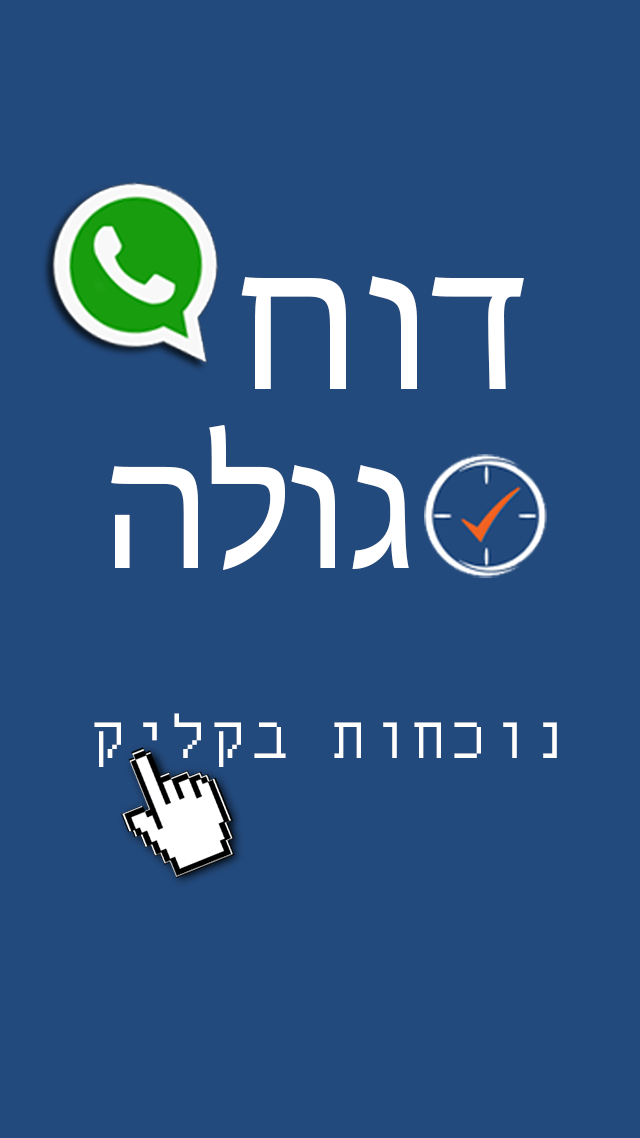
<style>
.page{position:relative;width:640px;height:1138px;background:#234a7d}
.page>*{position:absolute;margin:0}
.t1{font:204.2px "MyriadHebrew-Regular";color:#ffffff}
.t2{font:185.6px "MyriadHebrew-Regular";color:#ffffff}
.t3{font:71.1px "Courier";color:#ffffff}
</style>
<div class="page">
<p class="t1" style="left:241px;top:276px;width:283px;height:113px">חוד</p>
<p class="t2" style="left:111px;top:425px;width:298px;height:145px">הלוג</p>
<p class="t3" style="left:94px;top:713px;width:463px;height:54px">קילקב תוחכונ</p>
</div>
